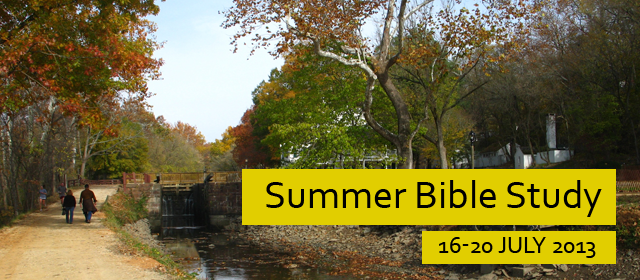
<style>
.page{position:relative;width:640px;height:280px}
.page>*{position:absolute;margin:0}
.t1{font:40px "Corbel";color:#000000}
.t2{font:24px "Corbel";color:#000000;text-transform:uppercase}
</style>
<div class="page">
<p class="t1" style="left:266px;top:180px;width:336px;height:37px">Summer Bible Study</p>
<p class="t2" style="left:439px;top:237px;width:157px;height:21px">16-20 July 2013</p>
</div>
